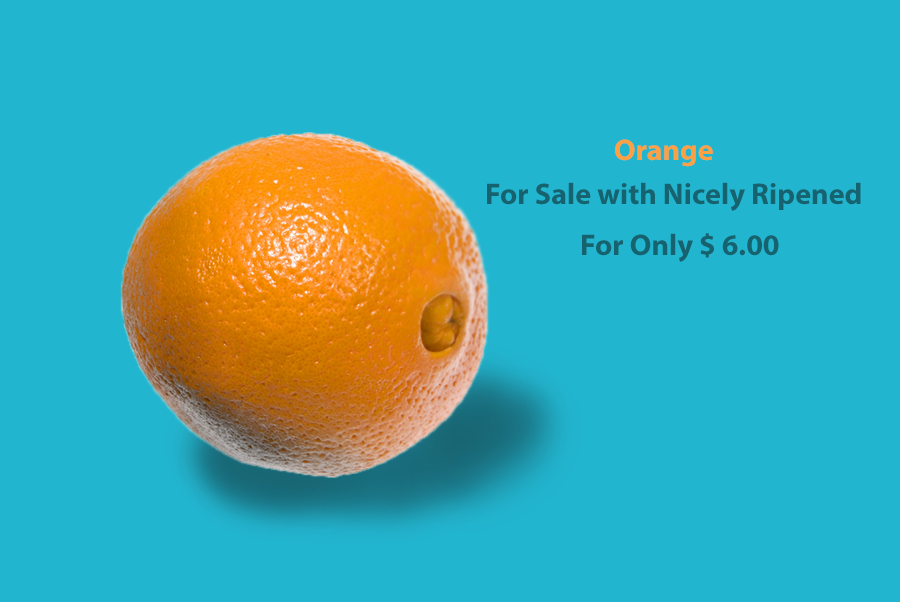
<style>
.page{position:relative;width:900px;height:602px;background:#22b5cf}
.page>*{position:absolute;margin:0}
.t1{font:30px "MyriadPro-Bold";color:#fca044}
.t2{font:30px "MyriadPro-Bold";color:#17626f}
</style>
<div class="page">
<p class="t1" style="left:615px;top:139px;width:98px;height:28px">Orange</p>
<p class="t2" style="left:487px;top:182px;width:374px;height:29px">For Sale with Nicely Ripened</p>
<p class="t2" style="left:582px;top:233px;width:197px;height:29px">For Only $ 6.00</p>
</div>
